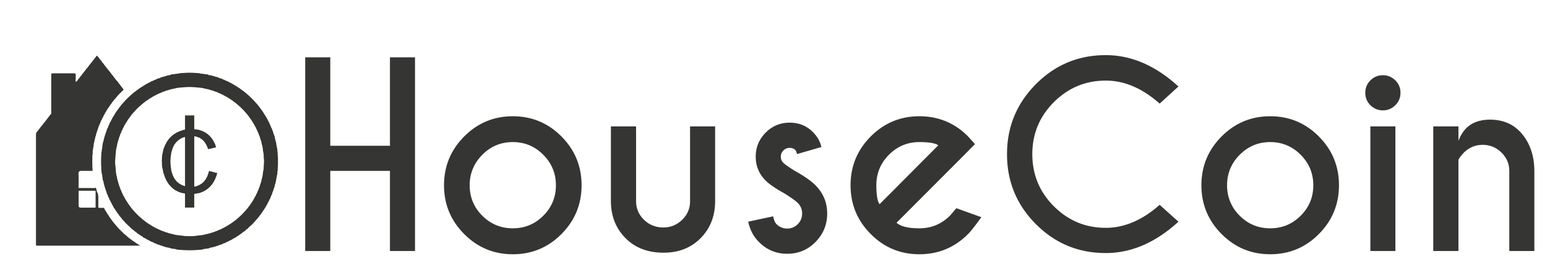
<style>
.page{position:relative;width:1568px;height:277px;background:#ffffff}
.page>*{position:absolute;margin:0}
.t1{font:247.5px "CaviarDreams-Bold";color:#353533}
</style>
<div class="page">
<p class="t1" style="left:305px;top:54px;width:1230px;height:200px">HouseCoin</p>
</div>
